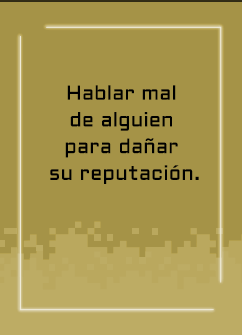
<style>
.page{position:relative;width:242px;height:335px;background:#a59347}
.page>*{position:absolute;margin:0}
.t1{font:20px/26.7px "Aldrich-Regular";letter-spacing:0.015em;color:#000000}
</style>
<div class="page">
<p class="t1" style="left:50px;top:85px;width:149px;height:99px;text-align:center">Hablar mal <br>de alguien <br>para dañar <br>su reputación.</p>
</div>
